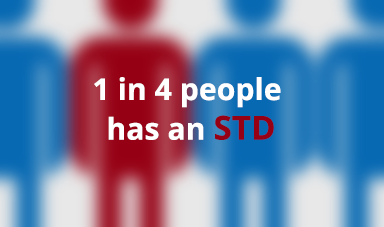
<style>
.page{position:relative;width:384px;height:227px}
.page>*{position:absolute;margin:0}
.t1{font:30px "OpenSans-Bold";letter-spacing:0.004em;color:#ffffff}
.t2{font:33px "OpenSans-Bold";letter-spacing:0.004em;color:#960014}
</style>
<div class="page">
<p class="t1" style="left:94px;top:77px;width:187px;height:63px;text-align:center">1 in 4 people <br>has an <span class="t2">STD</span></p>
</div>
